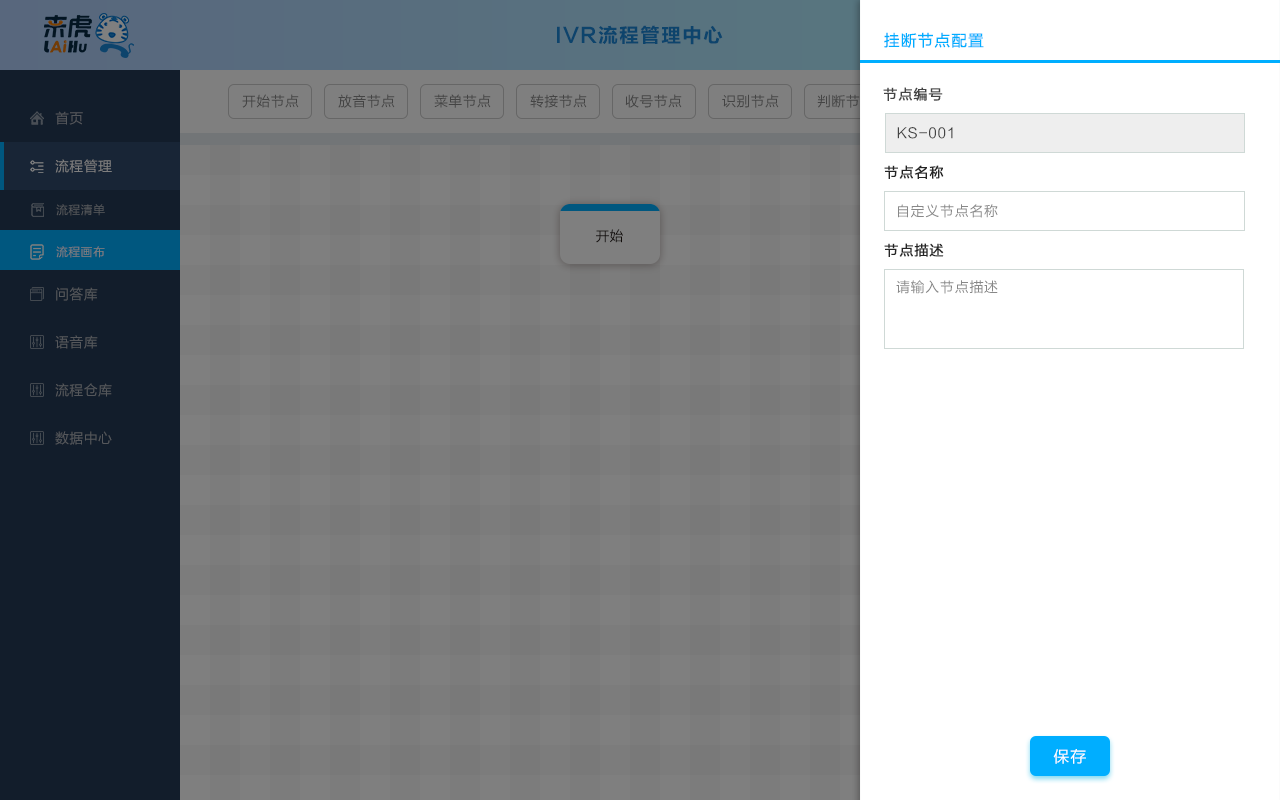
<style>
.page{position:relative;width:1280px;height:800px;background:#ffffff}
.page>*{position:absolute;margin:0}
.t1{font:20px "FZLTCHJW--GB1-0";letter-spacing:0.05em;color:#0d446c}
.t2{font:16px "FZLTHJW--GB1-0";letter-spacing:0.05em;color:#00aeff}
.t3{font:14px "FZLTHJW--GB1-0";letter-spacing:0.05em;color:#444444;font-weight:bold}
.t4{font:14px "FZLTHJW--GB1-0";letter-spacing:0.025em;color:#444444}
.t5{font:14px "FZLTHJW--GB1-0";letter-spacing:0.025em;color:#54575b}
.t6{font:14px "FZLTHJW--GB1-0";letter-spacing:0.05em;color:#444444}
.t7{font:14px "FZLTHJW--GB1-0";letter-spacing:0.025em;color:#7f7f7f}
.t8{font:14px "FZLTHJW--GB1-0";letter-spacing:0.05em;color:#252525;font-weight:bold}
.t9{font:12px "FZLTHJW--GB1-0";letter-spacing:0.025em;color:#55575b}
.t10{font:14px "FZLTHJW--GB1-0";letter-spacing:0.05em;color:#888888}
.t11{font:14px "FZLTHJW--GB1-0";color:#231815}
.t12{font:12px "FZLTHJW--GB1-0";letter-spacing:0.025em;color:#7f7f7f}
.t13{font:14px "FZLTHJW--GB1-0";letter-spacing:0.025em;color:#55575b}
.t14{font:16px "FZLTHJW--GB1-0";letter-spacing:0.05em;color:#ffffff}
</style>
<div class="page">
<p class="t1" style="left:557px;top:25px;width:166px;height:20px">IVR流程管理中心</p>
<p class="t2" style="left:884px;top:32px;width:100px;height:16px">挂断节点配置</p>
<p class="t3" style="left:883px;top:87px;width:60px;height:14px">节点编号</p>
<p class="t4" style="left:242px;top:94px;width:57px;height:14px">开始节点</p>
<p class="t4" style="left:338px;top:94px;width:57px;height:14px">放音节点</p>
<p class="t4" style="left:434px;top:94px;width:57px;height:14px">菜单节点</p>
<p class="t4" style="left:530px;top:94px;width:57px;height:14px">转接节点</p>
<p class="t4" style="left:625px;top:94px;width:57px;height:14px">收号节点</p>
<p class="t4" style="left:722px;top:94px;width:57px;height:14px">识别节点</p>
<p class="t5" style="left:55px;top:111px;width:28px;height:14px">首页</p>
<p class="t6" style="left:897px;top:127px;width:56px;height:12px">KS-001</p>
<p class="t7" style="left:55px;top:159px;width:57px;height:14px">流程管理</p>
<p class="t8" style="left:884px;top:165px;width:60px;height:14px">节点名称</p>
<p class="t9" style="left:56px;top:204px;width:49px;height:12px">流程清单</p>
<p class="t10" style="left:898px;top:204px;width:100px;height:14px">自定义节点名称</p>
<p class="t11" style="left:596px;top:229px;width:27px;height:14px">开始</p>
<p class="t12" style="left:56px;top:246px;width:49px;height:12px">流程画布</p>
<p class="t8" style="left:884px;top:243px;width:60px;height:14px">节点描述</p>
<p class="t10" style="left:896px;top:280px;width:102px;height:14px">请输入节点描述</p>
<p class="t13" style="left:56px;top:287px;width:42px;height:14px">问答库</p>
<p class="t13" style="left:55px;top:335px;width:43px;height:14px">语音库</p>
<p class="t13" style="left:55px;top:383px;width:57px;height:14px">流程仓库</p>
<p class="t13" style="left:55px;top:431px;width:57px;height:14px">数据中心</p>
<p class="t14" style="left:1053px;top:749px;width:33px;height:15px">保存</p>
</div>
